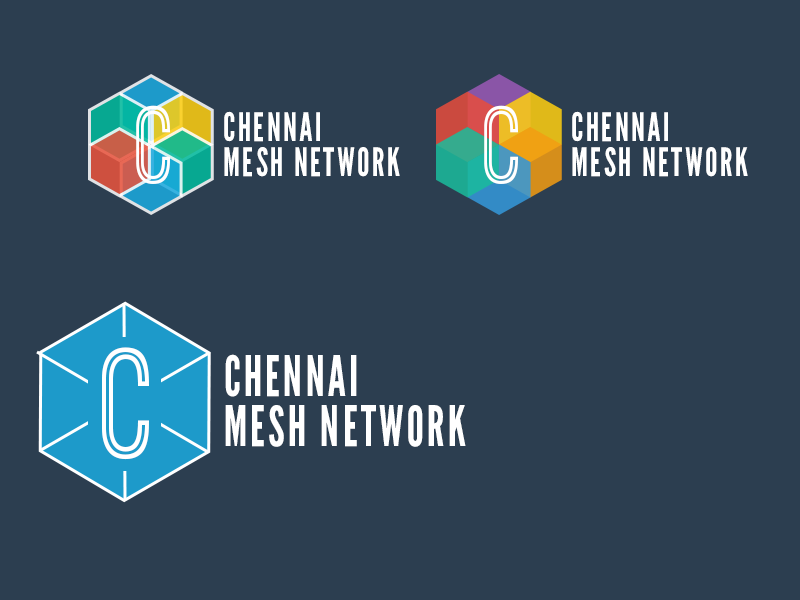
<style>
.page{position:relative;width:800px;height:600px;background:#2c3e50}
.page>*{position:absolute;margin:0}
.t1{font:113.9px "OstrichSansInline-Regular";letter-spacing:0.07em;color:#ffffff;scale:0.9 1}
.t2{font:39.1px/35.1px "LeagueGothic-Regular";letter-spacing:0.07em;color:#ffffff;scale:0.9 1}
.t3{font:162.4px "OstrichSansInline-Regular";letter-spacing:0.07em;color:#ffffff;scale:0.86 1}
.t4{font:55.7px/50px "LeagueGothic-Regular";letter-spacing:0.07em;color:#ffffff;scale:0.86 1}
</style>
<div class="page">
<p class="t1" style="left:136px;top:105px;width:34px;height:79px">C</p>
<p class="t2" style="left:224px;top:111px;width:176px;height:66px">CHENNAI <br>MESH NETWORK</p>
<p class="t1" style="left:484px;top:105px;width:34px;height:79px">C</p>
<p class="t2" style="left:572px;top:111px;width:176px;height:66px">CHENNAI <br>MESH NETWORK</p>
<p class="t3" style="left:102px;top:347px;width:47px;height:113px">C</p>
<p class="t4" style="left:225px;top:354px;width:241px;height:93px">CHENNAI <br>MESH NETWORK</p>
</div>
